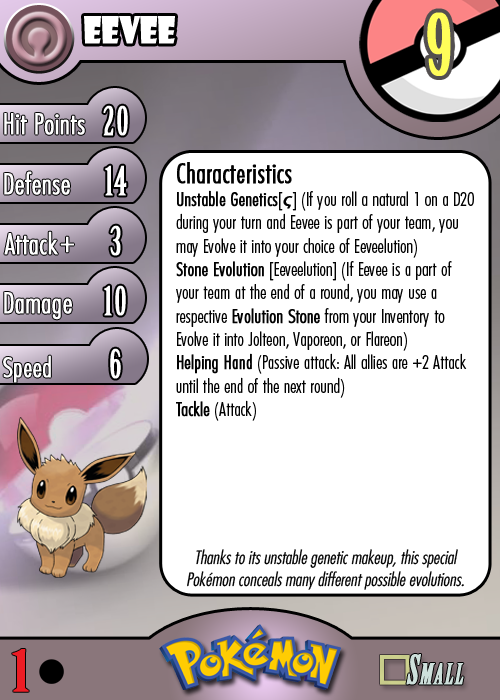
<style>
.page{position:relative;width:500px;height:700px;background:#ffffff}
.page>*{position:absolute;margin:0}
.t1{font:36.7px "ShowcardGothic-Reg";letter-spacing:-0.025em;color:#ffffff;scale:0.91 1}
.t2{font:83.3px "BirchStd";letter-spacing:0.025em;color:#fffd59;font-weight:bold}
.t3{font:27.8px "Futura-CondensedLight";color:#ffffff;font-weight:bold}
.t4{font:38.9px "BirchStd";letter-spacing:0.035em;color:#ffffff;font-weight:bold}
.t5{font:19.4px "FuturaCondensedBQ-Light";color:#010101}
.t6{font:27.8px "FuturaCondensedBQ-Light";color:#010101;font-weight:bold}
.t7{font:19.4px "FuturaCondensedBQ-Light";color:#010101;font-weight:bold}
.t8{font:19.4px "MyriadPro-Regular";letter-spacing:0.1em;color:#010101;font-weight:bold;font-style:italic}
.t9{font:30.6px "Futura-CondensedLight";color:#ffffff;font-weight:bold}
.t10{font:27.8px "FuturaCondensedBQ-Light";color:#ffffff;font-weight:bold}
.t11{font:18.1px "Futura-CondensedLight";color:#010101;font-style:italic}
.t12{font:55.6px "BirchStd";color:#ed1c24;font-weight:bold;scale:1.5 1}
</style>
<div class="page">
<p class="t1" style="left:84px;top:16px;width:91px;height:28px">eevee</p>
<p class="t2" style="left:427px;top:12px;width:24px;height:64px">9</p>
<p class="t3" style="left:4px;top:113px;width:81px;height:22px">Hit Points</p>
<p class="t4" style="left:103px;top:105px;width:25px;height:31px">20</p>
<p class="t3" style="left:4px;top:171px;width:66px;height:24px">Defense</p>
<p class="t4" style="left:105px;top:165px;width:22px;height:31px">14</p>
<p class="t5" style="left:176px;top:162px;width:298px;height:259px"><span class="t6">Characteristics<br></span><span class="t7">Unstable Genetics</span>[<span class="t8">ς</span>] (If you roll a natural 1 on a D20  during your turn and Eevee is part of your team, you may Evolve it into your choice of Eeveelution)<br><span class="t7">Stone Evolution</span> [Eeveelution] (If Eevee is a part of your team at the end of a round, you may use a respective <span class="t7">Evolution Stone</span> from your Inventory to Evolve it into Jolteon, Vaporeon, or Flareon)<br><span class="t7">Helping Hand</span> (Passive attack: All allies are +2 Attack until the end of the next round)<br><span class="t7">Tackle</span> (Attack)</p>
<p class="t3" style="left:4px;top:231px;width:54px;height:24px">Attack</p>
<p class="t4" style="left:110px;top:225px;width:11px;height:31px">3</p>
<p class="t9" style="left:60px;top:236px;width:14px;height:17px">+</p>
<p class="t3" style="left:4px;top:292px;width:68px;height:28px">Damage</p>
<p class="t4" style="left:104px;top:285px;width:22px;height:31px">10</p>
<p class="t4" style="left:110px;top:348px;width:11px;height:31px">6</p>
<p class="t10" style="left:3px;top:355px;width:48px;height:28px">Speed</p>
<p class="t11" style="left:187px;top:549px;width:277px;height:41px;text-align:center">Thanks to its unstable genetic makeup, this special Pokémon conceals many different possible evolutions.</p>
<p class="t12" style="left:12px;top:649px;width:17px;height:43px">1</p>
</div>
